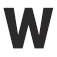
<style>
.page{position:relative;width:57px;height:57px;background:#ffffff}
.page>*{position:absolute;margin:0}
.t1{font:56px "Industry-Black";color:#2b2a28;text-transform:uppercase}
</style>
<div class="page">
<p class="t1" style="left:3px;top:7px;width:51px;height:42px">W</p>
</div>
